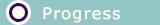
<style>
.page{position:relative;width:160px;height:25px;background:#94c5c5}
.page>*{position:absolute;margin:0}
.t1{font:16px "Verdana";letter-spacing:0.055em;color:#fffff0;font-weight:bold}
</style>
<div class="page">
<p class="t1" style="left:43px;top:7px;width:77px;height:16px">Progress</p>
</div>
